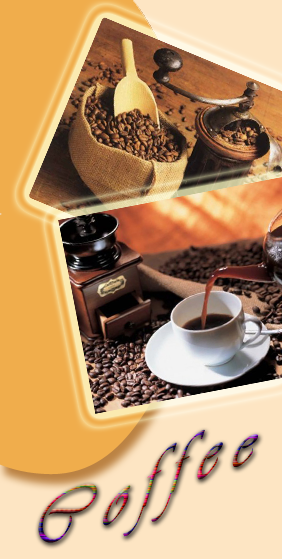
<style>
.page{position:relative;width:282px;height:559px}
.page>*{position:absolute;margin:0}
.t1{font:72px "Vivaldii";letter-spacing:0.2em}
</style>
<div class="page">
<p class="t1" style="left:38px;top:429px;width:220px;height:114px">Coffee</p>
</div>
